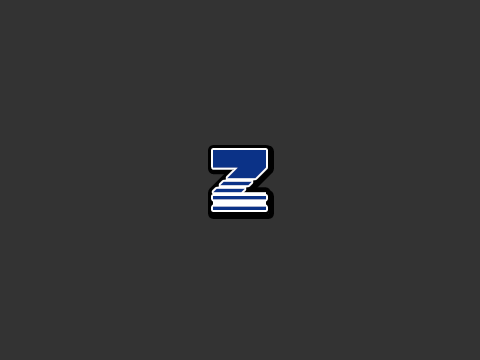
<style>
.page{position:relative;width:480px;height:360px;background:#333333}
.page>*{position:absolute;margin:0}
.t1{font:63.4px "Cyberspace-Raceway-Back";letter-spacing:0.03em}
.t2{font:60px "Cyberspace-Raceway-Back";letter-spacing:0.03em}
.t3{font:60px "Cyberspace-Raceway-Front";letter-spacing:0.03em;color:#0b3287}
</style>
<div class="page">
<p class="t1" style="left:213px;top:150px;width:56px;height:64px">z</p>
<p class="t2" style="left:213px;top:150px;width:53px;height:60px">z</p>
<p class="t3" style="left:213px;top:150px;width:53px;height:60px">z</p>
</div>
